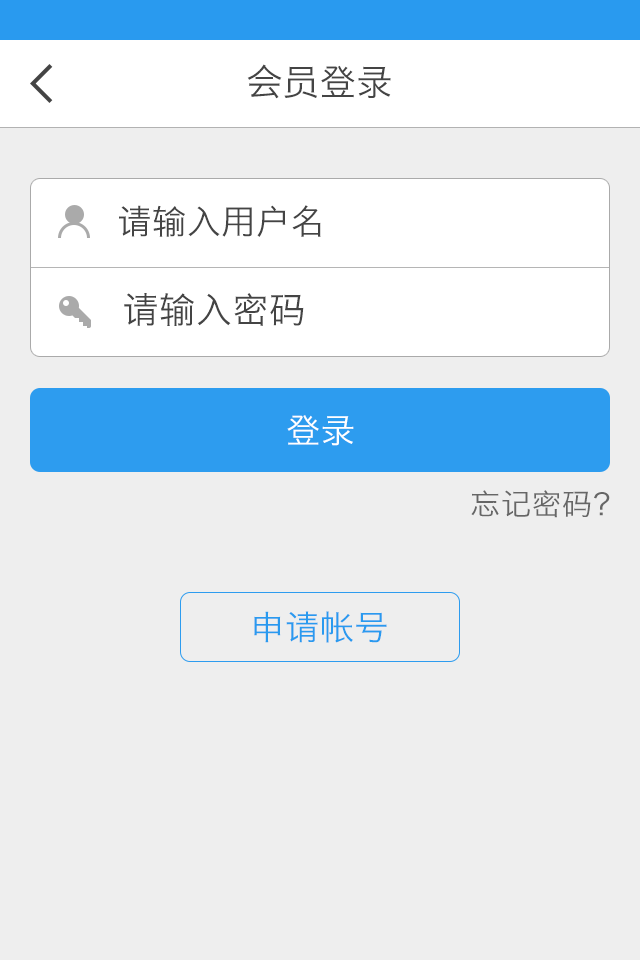
<style>
.page{position:relative;width:640px;height:960px;background:#eeeeee}
.page>*{position:absolute;margin:0}
.t1{font:36px "HiraginoSansGB-W3";letter-spacing:0.02em;color:#444444}
.t2{font:34px "HiraginoSansGB-W3";letter-spacing:0.02em;color:#444444}
.t3{font:34px "HiraginoSansGB-W3";letter-spacing:0.02em;color:#ffffff}
.t4{font:30px "HiraginoSansGB-W3";letter-spacing:0.02em;color:#666666}
.t5{font:34px "HiraginoSansGB-W3";letter-spacing:0.02em;color:#299aef}
</style>
<div class="page">
<p class="t1" style="left:247px;top:64px;width:144px;height:35px">会员登录</p>
<p class="t2" style="left:119px;top:205px;width:202px;height:32px">请输入用户名</p>
<p class="t1" style="left:124px;top:293px;width:180px;height:33px">请输入密码</p>
<p class="t3" style="left:287px;top:415px;width:67px;height:31px">登录</p>
<p class="t4" style="left:471px;top:490px;width:139px;height:28px">忘记密码？</p>
<p class="t5" style="left:254px;top:611px;width:133px;height:32px">申请帐号</p>
</div>
